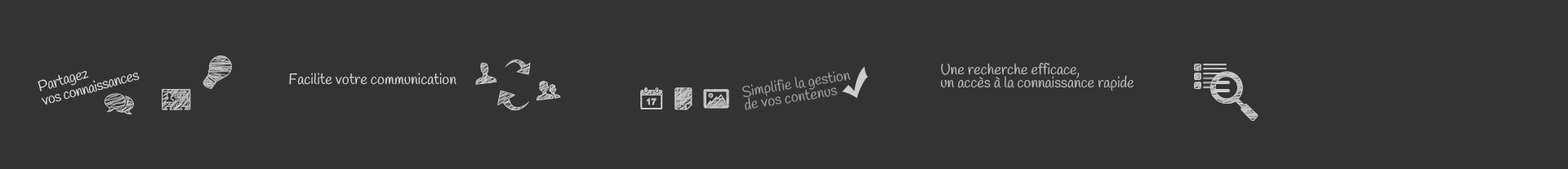
<style>
.page{position:relative;width:1568px;height:169px;background:#333333}
.page>*{position:absolute;margin:0}
.t1{font:14.7px/13.1px "Handlee-Regular";color:#c0c0c0}
.t2{font:14.7px/14.7px "Handlee-Regular";letter-spacing:-0.03em;color:#e1e1e1}
.t3{font:14.7px "Handlee-Regular";color:#d9d9d9}
.t4{font:14.7px/13.1px "Handlee-Regular";color:#a3a3a3}
</style>
<div class="page">
<p class="t1" style="left:941px;top:62px;width:193px;height:29px">Une recherche efficace,<br>un accès à la connaissance rapide</p>
<p class="t2" style="left:38px;top:70px;width:102px;height:35px;rotate:-15deg">Partagez <br>vos connaissances</p>
<p class="t3" style="left:289px;top:73px;width:168px;height:12px">Facilite votre communication</p>
<p class="t4" style="left:742px;top:71px;width:109px;height:39px;rotate:-9deg">Simplifie la gestion <br>de vos contenus</p>
</div>
